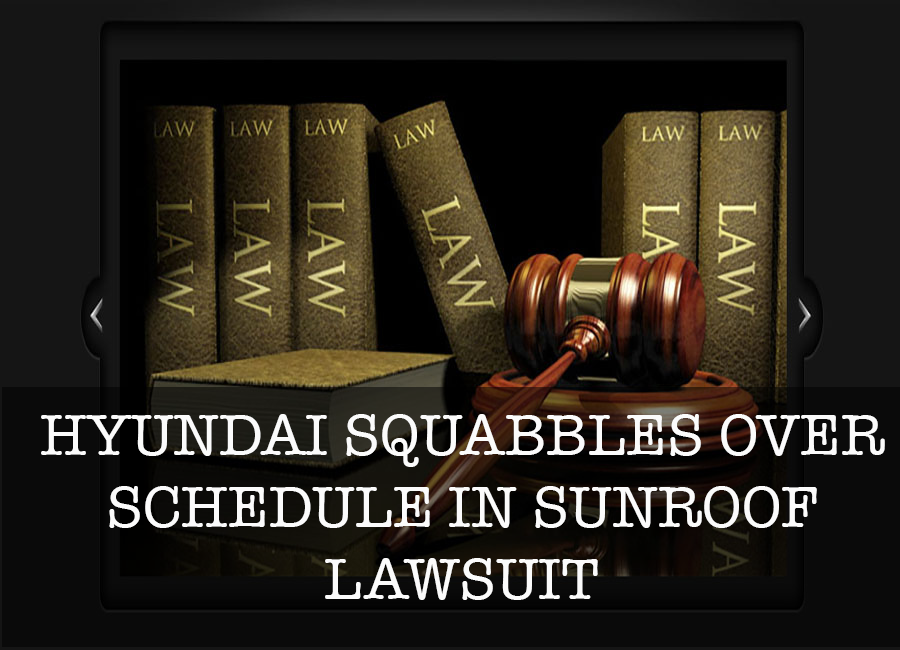
<style>
.page{position:relative;width:900px;height:650px}
.page>*{position:absolute;margin:0}
.t1{font:60px "AmericanTypewriter";color:#fbfbfb}
</style>
<div class="page">
<p class="t1" style="left:41px;top:414px;width:844px;height:186px;text-align:center">HYUNDAI SQUABBLES OVER SCHEDULE IN SUNROOF LAWSUIT</p>
</div>
